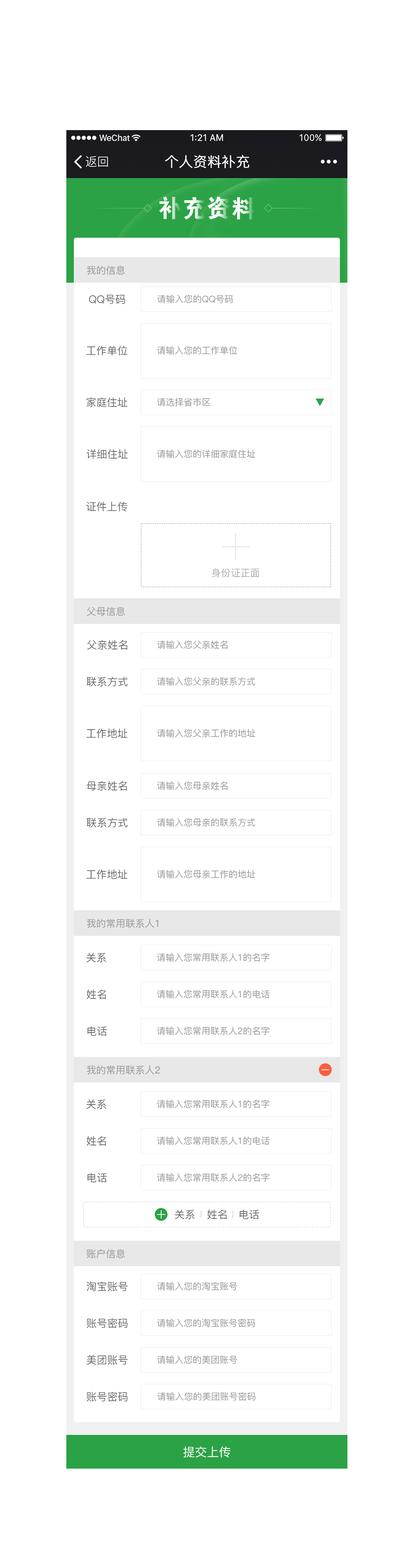
<style>
.page{position:relative;width:419px;height:1568px;background:#ffffff}
.page>*{position:absolute;margin:0}
.t1{font:12px "PingFang-SC-Regular";color:#ffffff}
.t2{font:13.9px "PingFang-SC-Regular";color:#ffffff;font-weight:bold}
.t3{font:24.7px "FZDHTJW--GB1-0"}
.t4{font:9.7px "PingFang-SC-Medium";color:#999999}
.t5{font:10.5px "PingFang-SC-Medium";color:#676767}
.t6{font:9px "PingFang-SC-Medium";color:#999999}
.t7{font:9.7px "PingFang-SC-Regular";color:#999999}
.t8{font:10.5px "PingFang-SC-Medium";color:#666666}
.t9{font:12px "PingFang-SC-Medium";color:#ffffff}
</style>
<div class="page">
<p class="t1" style="left:86px;top:156px;width:22px;height:11px">返回</p>
<p class="t2" style="left:165px;top:155px;width:84px;height:13px">个人资料补充</p>
<p class="t3" style="left:159px;top:196px;width:23px;height:23px">补</p>
<p class="t3" style="left:184px;top:197px;width:22px;height:23px">充</p>
<p class="t3" style="left:208px;top:196px;width:22px;height:23px">资</p>
<p class="t3" style="left:232px;top:197px;width:23px;height:23px">料</p>
<p class="t4" style="left:87px;top:265px;width:38px;height:10px">我的信息</p>
<p class="t5" style="left:89px;top:295px;width:36px;height:9px">QQ号码</p>
<p class="t6" style="left:157px;top:295px;width:76px;height:8px">请输入您的QQ号码</p>
<p class="t5" style="left:86px;top:346px;width:41px;height:9px">工作单位</p>
<p class="t6" style="left:157px;top:346px;width:81px;height:9px">请输入您的工作单位</p>
<p class="t5" style="left:87px;top:397px;width:40px;height:10px">家庭住址</p>
<p class="t6" style="left:157px;top:398px;width:53px;height:8px">请选择省市区</p>
<p class="t5" style="left:87px;top:449px;width:41px;height:10px">详细住址</p>
<p class="t6" style="left:157px;top:450px;width:99px;height:8px">请输入您的详细家庭住址</p>
<p class="t5" style="left:86px;top:502px;width:41px;height:9px">证件上传</p>
<p class="t7" style="left:212px;top:568px;width:48px;height:9px">身份证正面</p>
<p class="t4" style="left:87px;top:607px;width:38px;height:9px">父母信息</p>
<p class="t5" style="left:87px;top:640px;width:40px;height:10px">父亲姓名</p>
<p class="t6" style="left:157px;top:640px;width:71px;height:9px">请输入您父亲姓名</p>
<p class="t5" style="left:87px;top:677px;width:41px;height:10px">联系方式</p>
<p class="t6" style="left:157px;top:677px;width:98px;height:9px">请输入您父亲的联系方式</p>
<p class="t5" style="left:86px;top:729px;width:41px;height:9px">工作地址</p>
<p class="t6" style="left:157px;top:729px;width:99px;height:9px">请输入您父亲工作的地址</p>
<p class="t5" style="left:87px;top:781px;width:40px;height:10px">母亲姓名</p>
<p class="t6" style="left:157px;top:781px;width:71px;height:9px">请输入您母亲姓名</p>
<p class="t5" style="left:87px;top:818px;width:41px;height:9px">联系方式</p>
<p class="t6" style="left:157px;top:818px;width:98px;height:9px">请输入您母亲的联系方式</p>
<p class="t5" style="left:86px;top:869px;width:41px;height:10px">工作地址</p>
<p class="t6" style="left:157px;top:870px;width:99px;height:8px">请输入您母亲工作的地址</p>
<p class="t4" style="left:87px;top:919px;width:72px;height:9px">我的常用联系人1</p>
<p class="t5" style="left:86px;top:953px;width:20px;height:9px">关系</p>
<p class="t6" style="left:157px;top:953px;width:113px;height:9px">请输入您常用联系人1的名字</p>
<p class="t5" style="left:87px;top:989px;width:19px;height:10px">姓名</p>
<p class="t6" style="left:157px;top:990px;width:113px;height:8px">请输入您常用联系人1的电话</p>
<p class="t5" style="left:87px;top:1026px;width:20px;height:10px">电话</p>
<p class="t6" style="left:157px;top:1027px;width:113px;height:8px">请输入您常用联系人2的名字</p>
<p class="t4" style="left:87px;top:1065px;width:73px;height:10px">我的常用联系人2</p>
<p class="t5" style="left:86px;top:1099px;width:20px;height:10px">关系</p>
<p class="t6" style="left:157px;top:1100px;width:113px;height:8px">请输入您常用联系人1的名字</p>
<p class="t5" style="left:87px;top:1136px;width:19px;height:10px">姓名</p>
<p class="t6" style="left:157px;top:1136px;width:113px;height:9px">请输入您常用联系人1的电话</p>
<p class="t5" style="left:87px;top:1173px;width:20px;height:10px">电话</p>
<p class="t6" style="left:157px;top:1173px;width:113px;height:9px">请输入您常用联系人2的名字</p>
<p class="t8" style="left:175px;top:1210px;width:20px;height:9px">关系</p>
<p class="t8" style="left:207px;top:1210px;width:20px;height:9px">姓名</p>
<p class="t8" style="left:240px;top:1210px;width:19px;height:9px">电话</p>
<p class="t4" style="left:87px;top:1249px;width:38px;height:9px">账户信息</p>
<p class="t5" style="left:87px;top:1281px;width:41px;height:10px">淘宝账号</p>
<p class="t6" style="left:157px;top:1282px;width:80px;height:9px">请输入您的淘宝账号</p>
<p class="t5" style="left:87px;top:1318px;width:40px;height:10px">账号密码</p>
<p class="t6" style="left:157px;top:1318px;width:98px;height:9px">请输入您的淘宝账号密码</p>
<p class="t5" style="left:87px;top:1355px;width:41px;height:10px">美团账号</p>
<p class="t6" style="left:157px;top:1355px;width:80px;height:9px">请输入您的美团账号</p>
<p class="t5" style="left:87px;top:1392px;width:40px;height:10px">账号密码</p>
<p class="t6" style="left:157px;top:1392px;width:99px;height:9px">请输入您的美团账号密码</p>
<p class="t9" style="left:183px;top:1446px;width:48px;height:12px">提交上传</p>
</div>
